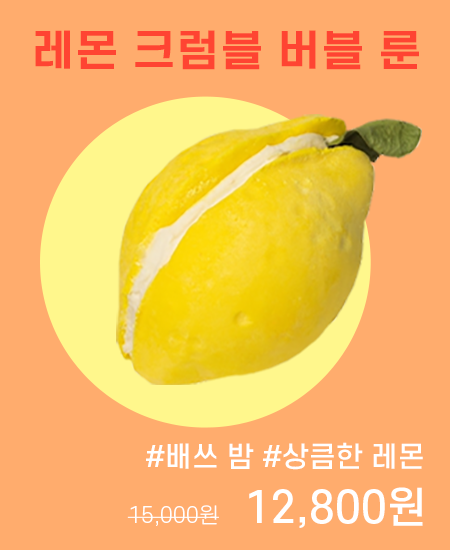
<style>
.page{position:relative;width:450px;height:550px;background:#ffac6d}
.page>*{position:absolute;margin:0}
.t1{font:41.7px "S-CoreDream-6Bold";color:#ff4432;scale:1.1 1}
.t2{font:27.8px "S-CoreDream-5Medium";color:#ffffff}
.t3{font:20.8px "S-CoreDream-3Light";color:#ffffff;text-transform:uppercase}
.t4{font:41.7px "S-CoreDream-5Medium";color:#ffffff}
</style>
<div class="page">
<p class="t1" style="left:35px;top:30px;width:384px;height:40px">레몬 크럼블 버블 룬</p>
<p class="t2" style="left:146px;top:442px;width:277px;height:28px">#배쓰 밤 #상큼한 레몬</p>
<p class="t3" style="left:127px;top:487px;width:296px;height:41px">15,000원     <span class="t4">12,800원</span></p>
</div>
